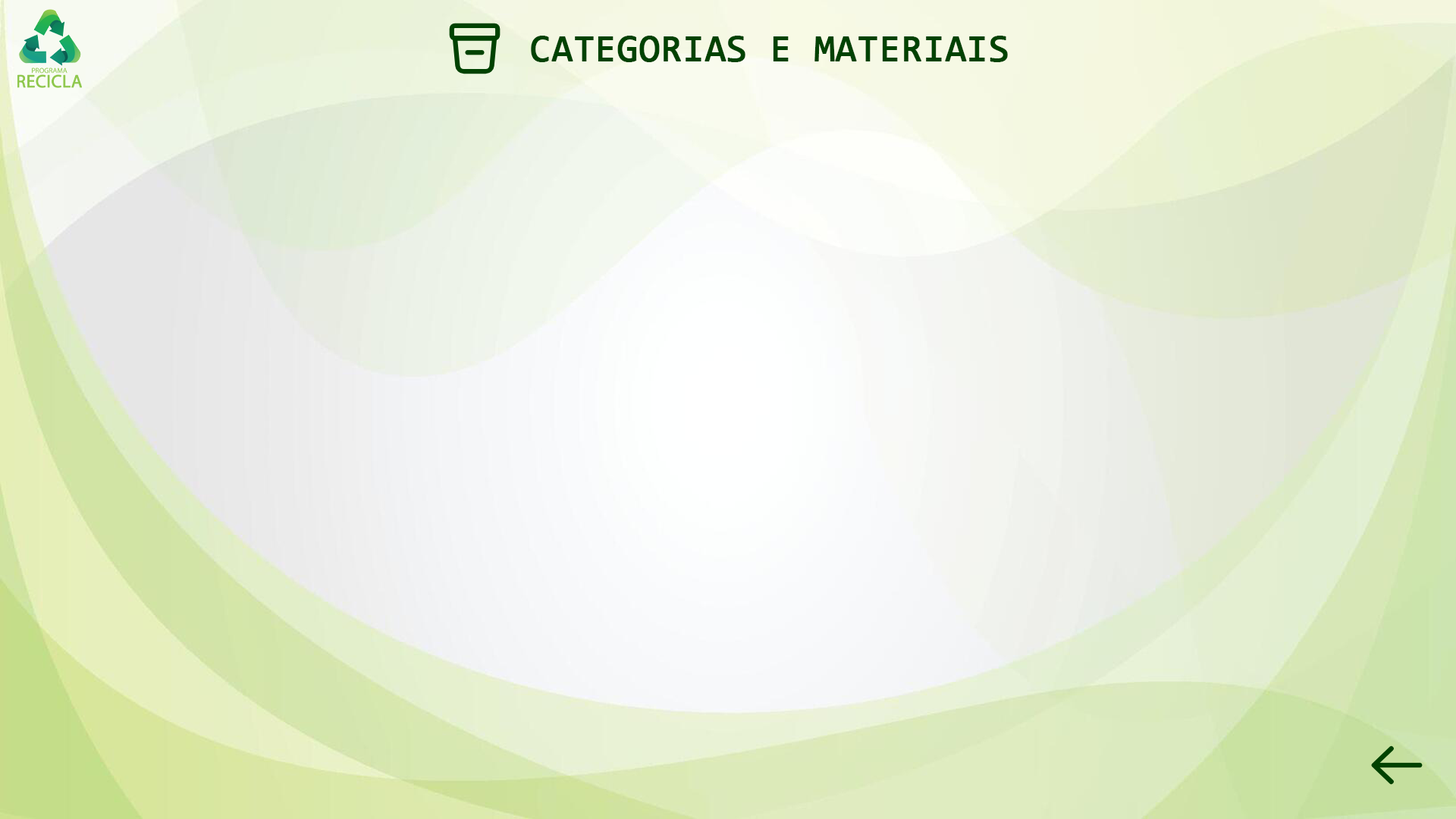
<style>
.page{position:relative;width:1456px;height:819px}
.page>*{position:absolute;margin:0}
.t1{font:37.9px "Consolas";color:#004201;font-weight:bold}
</style>
<div class="page">
<p class="t1" style="left:531px;top:36px;width:477px;height:26px">CATEGORIAS E MATERIAIS</p>
</div>
